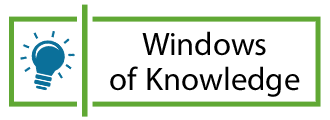
<style>
.page{position:relative;width:330px;height:120px;background:#ffffff}
.page>*{position:absolute;margin:0}
.t1{font:45.7px/35px "MyriadArabic-Regular";color:#000000}
</style>
<div class="page">
<p class="t1" style="left:110px;top:31px;width:190px;height:66px;text-align:center">Windows<br>of Knowledge</p>
</div>
